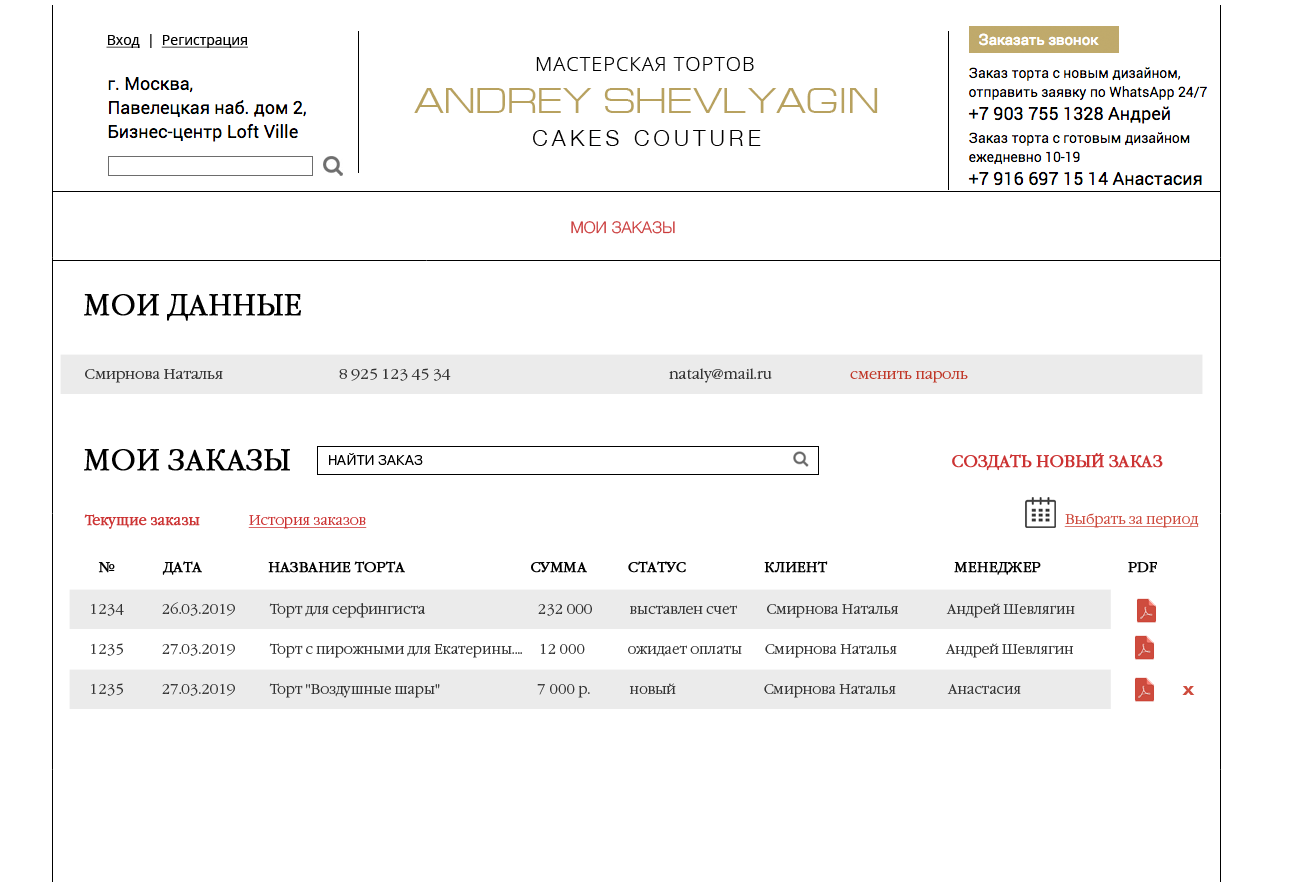
<style>
.page{position:relative;width:1302px;height:882px;background:#ffffff}
.page>*{position:absolute;margin:0}
.t1{font:14px "OpenSans";color:#000000;text-decoration:underline}
.t2{font:14px "OpenSans";color:#000000}
.t3{font:16px "Helvetica-Light";color:#ca3b3b;text-transform:uppercase}
.t4{font:28.5px "GaramondC-Light";color:#000000;font-weight:bold}
.t5{font:14px "GaramondC-Light";color:#333333;scale:1.05 1}
.t6{font:14px "GaramondC-Light";color:#c03728;scale:1.05 1}
.t7{font:14px "PragmaticaLight-Reg";color:#000000}
.t8{font:16px "GaramondC-Light";color:#cc3333;font-weight:bold}
.t9{font:14px "GaramondC-Light";color:#cc3333;text-decoration:underline}
.t10{font:14px "GaramondC-Light";color:#cc3333;font-weight:bold}
.t11{font:14px "GaramondC-Light";color:#ce4b3e;text-decoration:underline}
.t12{font:14px "GaramondC-Light";color:#000000;text-transform:uppercase;font-weight:bold}
.t13{font:14px/20px "GaramondC-Light";color:#333333}
.t14{font:16.4px "Arial-BoldMT";color:#ce4c3e;scale:1.33 1}
</style>
<div class="page">
<p class="t1" style="left:106px;top:34px;width:142px;height:14px">Вход<span class="t2">  |  </span>Регистрация</p>
<p class="t3" style="left:571px;top:221px;width:104px;height:13px">Мои заказЫ</p>
<p class="t4" style="left:84px;top:294px;width:217px;height:27px">МОИ ДАННЫЕ</p>
<p class="t5" style="left:85px;top:368px;width:883px;height:15px">Смирнова Наталья                                  8 925 123 45 34                                                                nataly@mail.ru                       <span class="t6">сменить пароль</span></p>
<p class="t4" style="left:84px;top:449px;width:206px;height:22px">МОИ ЗАКАЗЫ</p>
<p class="t7" style="left:329px;top:453px;width:94px;height:12px">НАЙТИ ЗАКАЗ</p>
<p class="t8" style="left:952px;top:453px;width:211px;height:18px">СОЗДАТЬ НОВЫЙ ЗАКАЗ</p>
<p class="t9" style="left:84px;top:514px;width:283px;height:15px"><span class="t10">Текущие заказы               </span>История заказов</p>
<p class="t11" style="left:1064px;top:513px;width:135px;height:15px">Выбрать за период</p>
<p class="t12" style="left:98px;top:561px;width:1059px;height:14px">№          Дата                   Название торта     Сумма          Статус       КЛИЕНТ                                   МЕНЕДЖЕР                        PDF</p>
<p class="t13" style="left:91px;top:602px;width:984px;height:96px">1234  26.03.2019 Торт для серфингиста                  232 000            выставлен счет         Смирнова Наталья               Андрей Шевлягин <br><br>1235  27.03.2019  Торт с пирожными для Екатерины....     12 000             ожидает оплаты       Смирнова Наталья               Андрей Шевлягин <br><br>1235  27.03.2019  Торт "Воздушные шары"                            7 000 р.            новый                           Смирнова Наталья                Анастасия</p>
<p class="t14" style="left:1182px;top:686px;width:13px;height:9px">х</p>
</div>
